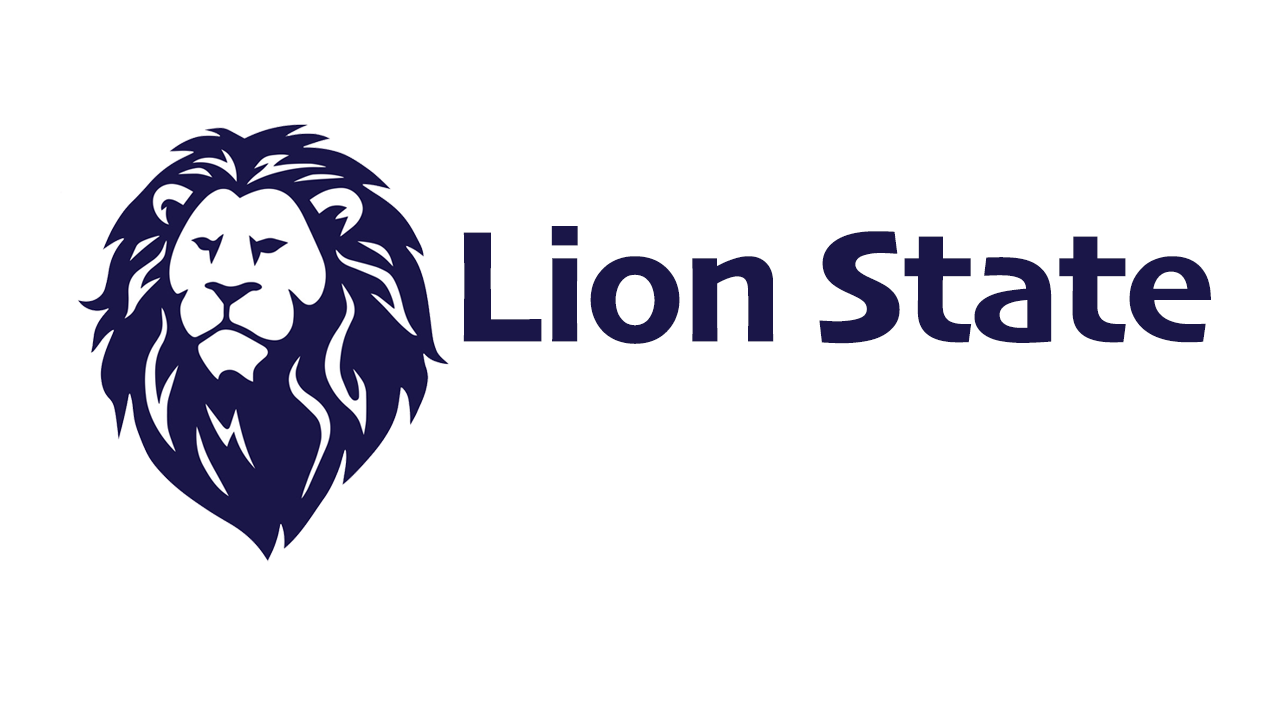
<style>
.page{position:relative;width:1280px;height:720px;background:#ffffff}
.page>*{position:absolute;margin:0}
.t1{font:166.7px "Skia-Bold";letter-spacing:-0.025em;color:#1a1648}
</style>
<div class="page">
<p class="t1" style="left:463px;top:226px;width:748px;height:118px">Lion State</p>
</div>
